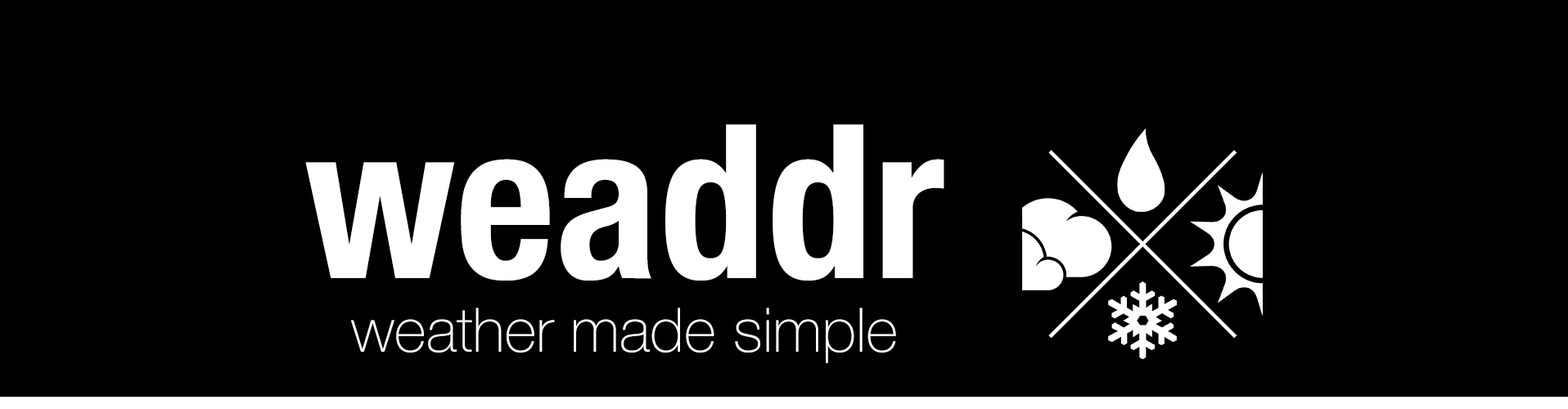
<style>
.page{position:relative;width:1568px;height:409px;background:#000000}
.page>*{position:absolute;margin:0}
.t1{font:61.4px "HelveticaNeue-Thin";color:#ffffff}
.t2{font:214.8px "HelveticaNeue-CondensedBold";color:#ffffff}
</style>
<div class="page">
<p class="t1" style="left:305px;top:124px;width:639px;height:239px;text-align:center"><span class="t2">weaddr<br></span>weather made simple</p>
</div>
